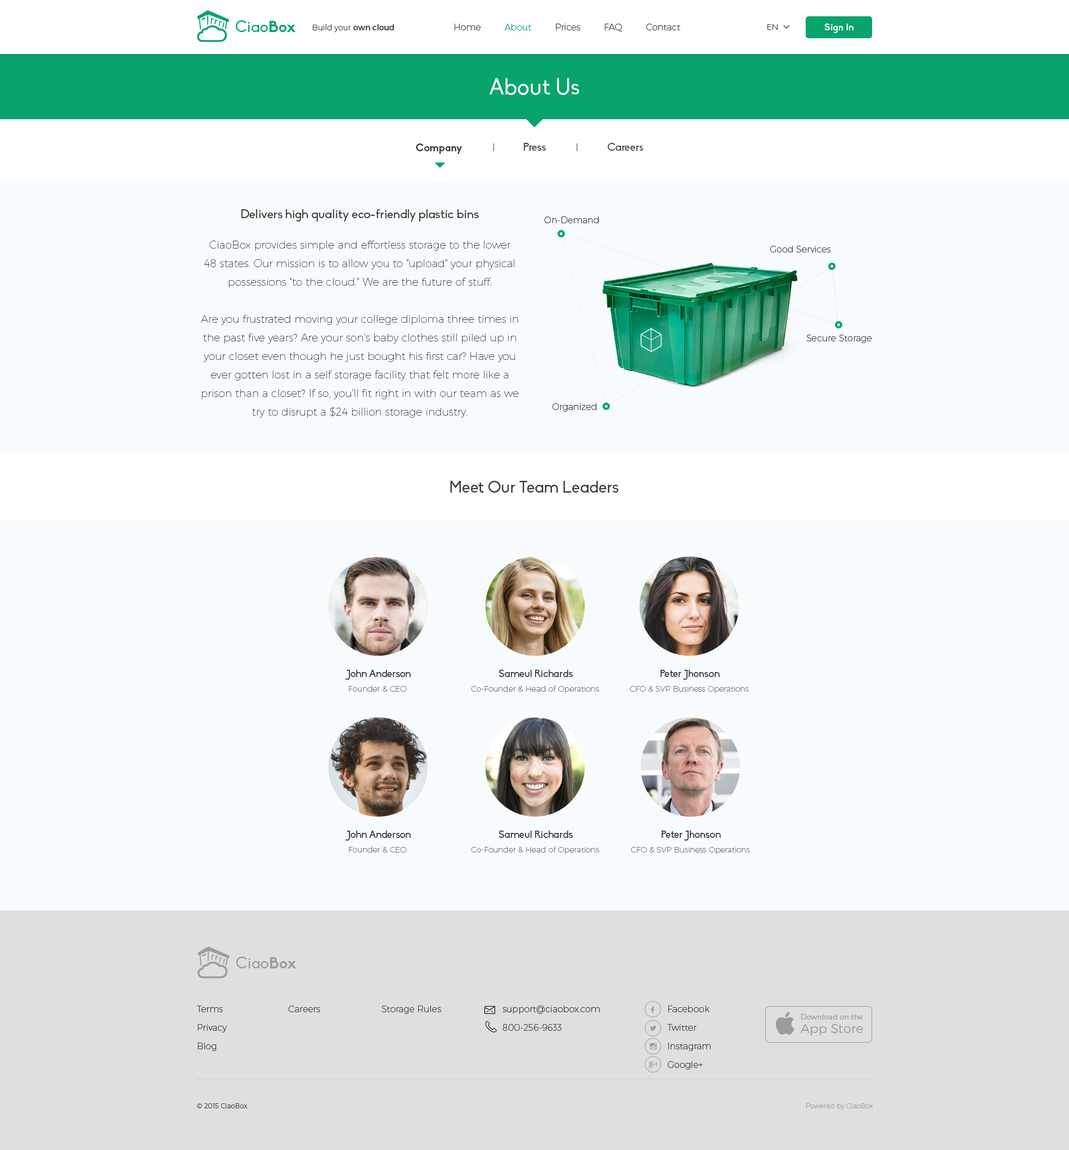
<style>
.page{position:relative;width:1069px;height:1150px;background:#f8fbfd}
.page>*{position:absolute;margin:0}
.t1{font:15.8px "Biko";color:#08a46c}
.t2{font:15.8px "Biko-Bold";color:#08a46c}
.t3{font:7.9px "Montserrat-UltraLight";color:#3d3d3d}
.t4{font:7.9px "Montserrat-Regular";color:#3d3d3d}
.t5{font:9px "Montserrat-UltraLight";color:#3d3d3d}
.t6{font:9px "Montserrat-UltraLight";color:#08a46c}
.t7{font:9.6px "Biko-Bold";color:#ffffff}
.t8{font:22.5px "Biko";color:#f8fbfd}
.t9{font:10.7px "Biko-Bold";color:#3d3d3d}
.t10{font:10.7px "Biko";color:#3d3d3d}
.t11{font:12.4px "Biko";color:#3d3d3d}
.t12{font:10.7px/18.6px "Montserrat-Hairline";color:#3d3d3d}
.t13{font:16.3px "Biko";color:#3d3d3d}
.t14{font:10.1px "Biko";color:#3d3d3d}
.t15{font:7.9px "Montserrat-Hairline"}
.t16{font:7.9px "Montserrat-Hairline";color:#3d3d3d}
.t17{font:15.8px "Biko";color:#9c9c9c}
.t18{font:15.8px "Biko-Bold";color:#9c9c9c}
.t19{font:9px/18.6px "Montserrat-UltraLight";color:#3d3d3d}
.t20{font:10.7px "Socialico";color:#9c9c9c;text-transform:uppercase}
.t21{font:7.3px/18.6px "Montserrat-Light";color:#9c9c9c}
.t22{font:12.8px/13.5px "Montserrat-Light";color:#9c9c9c}
.t23{font:6.8px "font2985";color:#9c9c9c}
.t24{font:12.4px "SocialicoPlus";color:#9c9c9c}
.t25{font:6.8px "Montserrat-UltraLight";color:#3d3d3d}
.t26{font:6.8px "Montserrat-UltraLight";color:#9c9c9c}
</style>
<div class="page">
<p class="t1" style="left:236px;top:20px;width:60px;height:12px">Ciao<span class="t2">Box</span></p>
<p class="t3" style="left:313px;top:24px;width:81px;height:8px">Build your <span class="t4">own cloud</span></p>
<p class="t5" style="left:454px;top:24px;width:226px;height:8px">Home         <span class="t6">About         </span>Prices         FAQ         Contact</p>
<p class="t3" style="left:767px;top:24px;width:10px;height:6px">EN</p>
<p class="t7" style="left:824px;top:23px;width:29px;height:10px">Sign In</p>
<p class="t8" style="left:489px;top:78px;width:90px;height:17px">About Us</p>
<p class="t9" style="left:416px;top:143px;width:46px;height:11px">Company</p>
<p class="t10" style="left:524px;top:143px;width:22px;height:8px">Press</p>
<p class="t10" style="left:608px;top:143px;width:35px;height:8px">Careers</p>
<p class="t11" style="left:241px;top:209px;width:238px;height:13px">Delivers high quality eco-friendly plastic bins</p>
<p class="t5" style="left:544px;top:217px;width:54px;height:6px">On-Demand</p>
<p class="t12" style="left:201px;top:241px;width:318px;height:177px;text-align:center">CiaoBox provides simple and effortless storage to the lower <br>48 states. Our mission is to allow you to "upload" your physical possessions "to the cloud." We are the future of stuff.<br><br>Are you frustrated moving your college diploma three times in the past five years? Are your son's baby clothes still piled up in your closet even though he just bought his first car? Have you ever gotten lost in a self storage facility that felt more like a prison than a closet? If so, you'll fit right in with our team as we try to disrupt a $24 billion storage industry.</p>
<p class="t5" style="left:770px;top:246px;width:61px;height:7px">Good Services</p>
<p class="t5" style="left:806px;top:335px;width:66px;height:8px">Secure Storage</p>
<p class="t5" style="left:552px;top:403px;width:44px;height:9px">Organized</p>
<p class="t13" style="left:450px;top:481px;width:168px;height:12px">Meet Our Team Leaders</p>
<p class="t14" style="left:345px;top:670px;width:66px;height:10px">John Anderson</p>
<p class="t14" style="left:498px;top:669px;width:75px;height:8px">Sameul Richards</p>
<p class="t14" style="left:660px;top:670px;width:59px;height:10px">Peter Jhonson</p>
<p class="t15" style="left:349px;top:686px;width:58px;height:6px">Founder &amp; CEO</p>
<p class="t16" style="left:471px;top:686px;width:128px;height:8px">Co-Founder &amp; Head of Operations</p>
<p class="t15" style="left:629px;top:686px;width:120px;height:8px">CFO &amp; SVP Business Operations</p>
<p class="t14" style="left:345px;top:831px;width:66px;height:10px">John Anderson</p>
<p class="t14" style="left:498px;top:830px;width:75px;height:8px">Sameul Richards</p>
<p class="t14" style="left:662px;top:831px;width:59px;height:10px">Peter Jhonson</p>
<p class="t15" style="left:349px;top:847px;width:58px;height:6px">Founder &amp; CEO</p>
<p class="t16" style="left:471px;top:847px;width:128px;height:7px">Co-Founder &amp; Head of Operations</p>
<p class="t15" style="left:631px;top:847px;width:119px;height:7px">CFO &amp; SVP Business Operations</p>
<p class="t17" style="left:236px;top:957px;width:60px;height:12px">Ciao<span class="t18">Box</span></p>
<p class="t19" style="left:197px;top:1006px;width:30px;height:45px">Terms<br>Privacy<br>Blog</p>
<p class="t5" style="left:288px;top:1006px;width:32px;height:6px">Careers</p>
<p class="t5" style="left:381px;top:1006px;width:60px;height:8px">Storage Rules</p>
<p class="t19" style="left:502px;top:1006px;width:98px;height:25px">support@ciaobox.com<br>800-256-9633</p>
<p class="t20" style="left:650px;top:1006px;width:4px;height:7px">F</p>
<p class="t19" style="left:667px;top:1006px;width:43px;height:64px">Facebook<br>Twitter<br>Instagram<br>Google+</p>
<p class="t21" style="left:800px;top:1014px;width:63px;height:22px">Download on the<br><span class="t22">App Store</span></p>
<p class="t20" style="left:650px;top:1026px;width:6px;height:5px">L</p>
<p class="t23" style="left:650px;top:1043px;width:6px;height:7px">x</p>
<p class="t24" style="left:649px;top:1061px;width:8px;height:7px">G</p>
<p class="t25" style="left:197px;top:1104px;width:52px;height:5px">© 2015 CiaoBox.</p>
<p class="t26" style="left:806px;top:1104px;width:66px;height:6px">Powered by CiaoBox</p>
</div>
